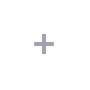
<style>
.page{position:relative;width:90px;height:90px;background:#ffffff}
.page>*{position:absolute;margin:0}
.t1{font:30px "Verdana-Bold";letter-spacing:-0.15em;color:#a3a0b0}
</style>
<div class="page">
<p class="t1" style="left:34px;top:34px;width:20px;height:20px">+</p>
</div>
